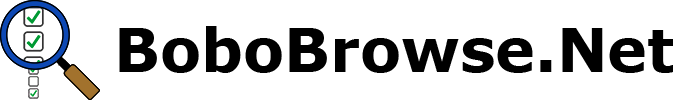
<style>
.page{position:relative;width:700px;height:100px;background:#ffffff}
.page>*{position:absolute;margin:0}
.t1{font:60px "Verdana-Bold";color:#000000}
</style>
<div class="page">
<p class="t1" style="left:119px;top:26px;width:554px;height:47px">BoboBrowse.Net</p>
</div>
